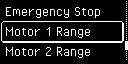
<style>
.page{position:relative;width:128px;height:64px;background:#000000}
.page>*{position:absolute;margin:0}
.t1{font:16px "PixelOperator";color:#ffffff}
</style>
<div class="page">
<p class="t1" style="left:5px;top:7px;width:95px;height:11px">Emergency Stop</p>
<p class="t1" style="left:5px;top:27px;width:85px;height:11px">Motor 1 Range</p>
<p class="t1" style="left:6px;top:47px;width:85px;height:11px">Motor 2 Range</p>
</div>
